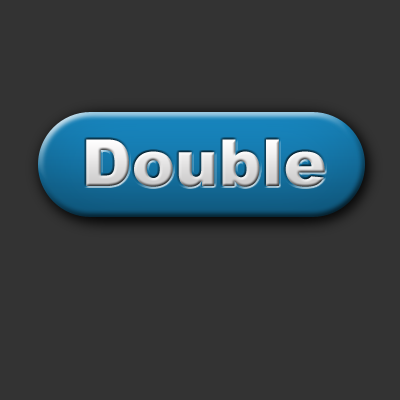
<style>
.page{position:relative;width:400px;height:400px;background:#333333}
.page>*{position:absolute;margin:0}
.t1{font:65px "Arial-Black"}
</style>
<div class="page">
<p class="t1" style="left:86px;top:139px;width:239px;height:48px">Double</p>
</div>
